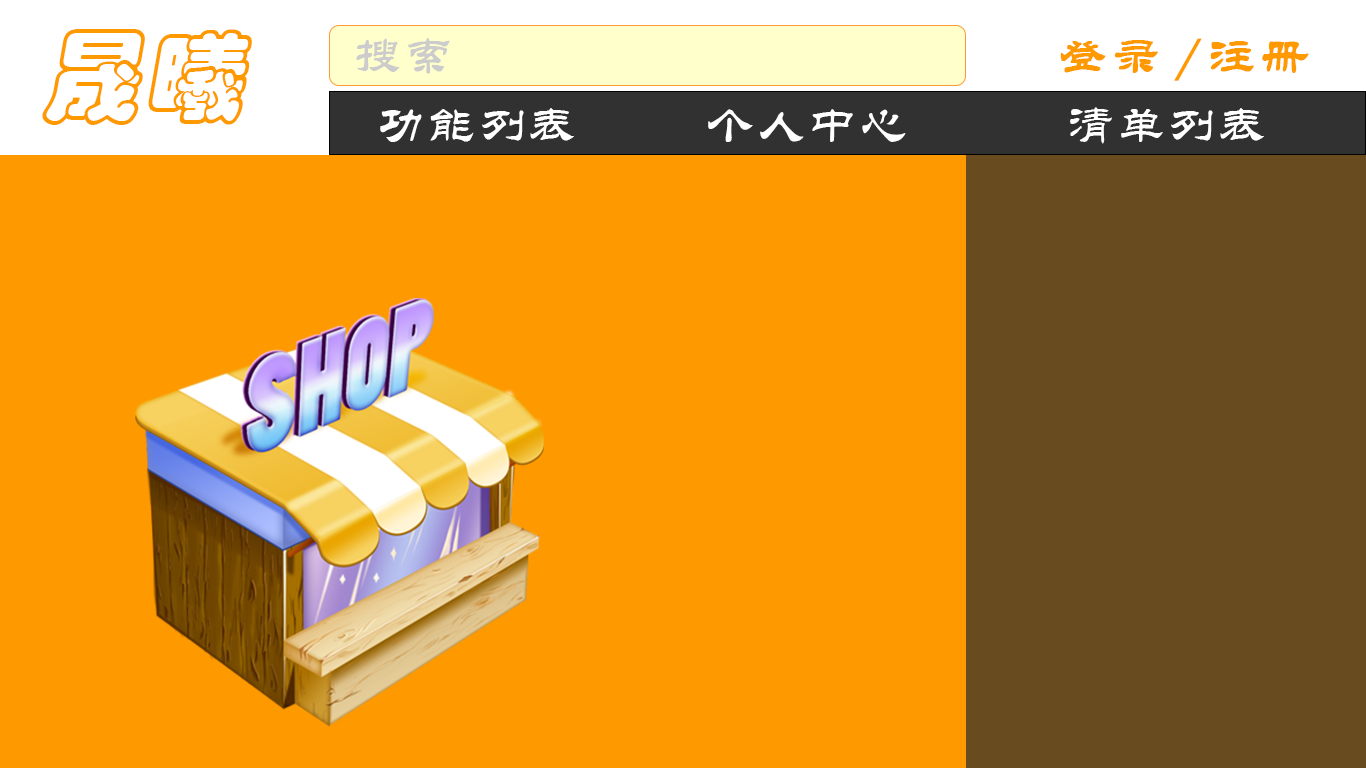
<style>
.page{position:relative;width:1366px;height:768px;background:#ff9900}
.page>*{position:absolute;margin:0}
.t1{font:100px "STCaiyun";letter-spacing:0.06em;color:#ff9900;font-style:italic}
.t2{font:48px "STLiti";letter-spacing:0.06em;color:#cccccc}
.t3{font:48px "STLiti";letter-spacing:0.06em;color:#ff9900;font-weight:bold}
.t4{font:48px "STLiti";letter-spacing:0.06em;color:#ffffff}
</style>
<div class="page">
<p class="t1" style="left:42px;top:29px;width:210px;height:96px">晟曦</p>
<p class="t2" style="left:356px;top:38px;width:94px;height:36px">搜索</p>
<p class="t3" style="left:1060px;top:38px;width:249px;height:43px">登录/注册</p>
<p class="t4" style="left:380px;top:108px;width:194px;height:34px">功能列表</p>
<p class="t4" style="left:708px;top:109px;width:198px;height:33px">个人中心</p>
<p class="t4" style="left:1070px;top:107px;width:194px;height:37px">清单列表</p>
</div>
